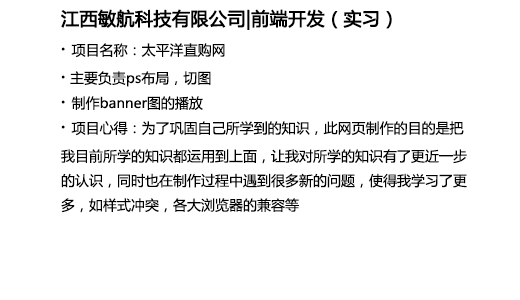
<style>
.page{position:relative;width:520px;height:300px;background:#ffffff}
.page>*{position:absolute;margin:0}
.t1{font:18px "MicrosoftYaHei";color:#000000;font-weight:bold}
.t2{font:14px "MicrosoftYaHei";color:#000000}
</style>
<div class="page">
<p class="t1" style="left:61px;top:9px;width:331px;height:21px">江西敏航科技有限公司|前端开发（实习）</p>
<p class="t2" style="left:61px;top:43px;width:164px;height:15px"><span class="t1">· </span>项目名称：太平洋直购网</p>
<p class="t2" style="left:61px;top:71px;width:150px;height:16px"><span class="t1">·</span> 主要负责ps布局，切图</p>
<p class="t2" style="left:61px;top:96px;width:142px;height:14px"><span class="t1">· </span>制作banner图的播放</p>
<p class="t2" style="left:61px;top:121px;width:406px;height:92px"><span class="t1">· </span>项目心得：为了巩固自己所学到的知识，此网页制作的目的是把<br>我目前所学的知识都运用到上面，让我对所学的知识有了更近一步<br>的认识，同时也在制作过程中遇到很多新的问题，使得我学习了更<br>多，如样式冲突，各大浏览器的兼容等</p>
</div>
